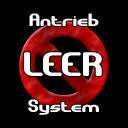
<style>
.page{position:relative;width:128px;height:128px;background:#000000}
.page>*{position:absolute;margin:0}
.t1{font:18px "GravitateBRK";color:#ffffff}
.t2{font:34px "GravitateBRK";color:#ffffff}
</style>
<div class="page">
<p class="t1" style="left:29px;top:13px;width:70px;height:13px">Antrieb</p>
<p class="t2" style="left:24px;top:52px;width:78px;height:24px">LEER</p>
<p class="t1" style="left:28px;top:99px;width:71px;height:16px">System</p>
</div>
